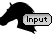
<style>
.page{position:relative;width:54px;height:36px;background:#ffffff}
.page>*{position:absolute;margin:0}
.t1{font:8px "MyriadPro-Regular";letter-spacing:0.06em;color:#000000}
</style>
<div class="page">
<p class="t1" style="left:27px;top:16px;width:20px;height:8px">Input</p>
</div>
